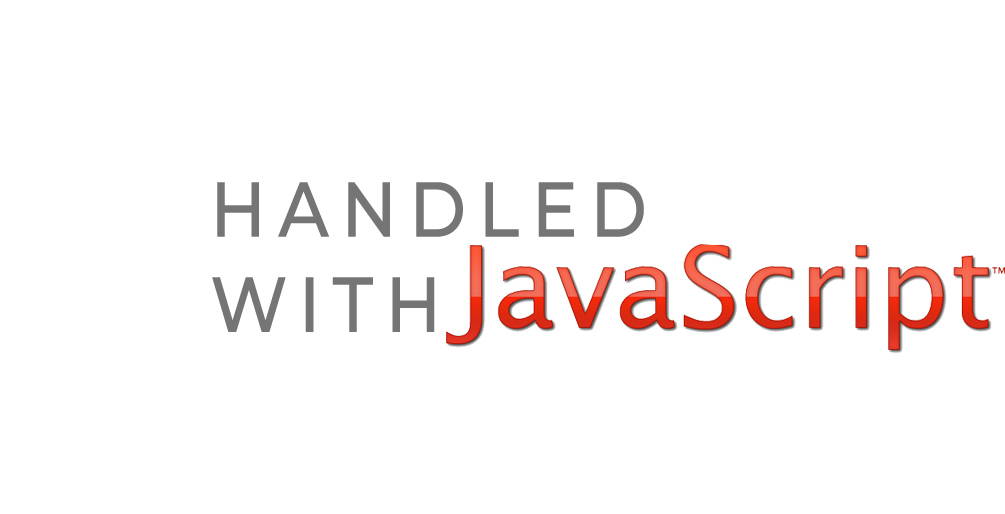
<style>
.page{position:relative;width:1005px;height:514px;background:#ffffff}
.page>*{position:absolute;margin:0}
.t1{font:77px "Montserrat-Medium";letter-spacing:0.16em;color:#757575;font-weight:bold;scale:0.89 1}
</style>
<div class="page">
<p class="t1" style="left:212px;top:182px;width:432px;height:150px">HANDLED<br>WITH</p>
</div>
